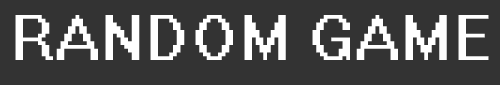
<style>
.page{position:relative;width:500px;height:85px;background:#333333}
.page>*{position:absolute;margin:0}
.t1{font:60px "System";color:#ffffff;text-transform:uppercase}
</style>
<div class="page">
<p class="t1" style="left:15px;top:15px;width:474px;height:45px">Random Game</p>
</div>
